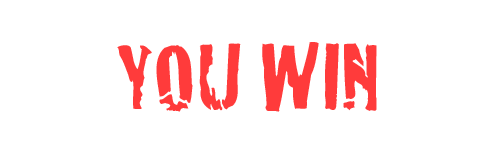
<style>
.page{position:relative;width:480px;height:150px;background:#ffffff}
.page>*{position:absolute;margin:0}
.t1{font:100px "Cracked";color:#ff3b3b}
</style>
<div class="page">
<p class="t1" style="left:117px;top:42px;width:260px;height:70px">YOU WIN</p>
</div>
